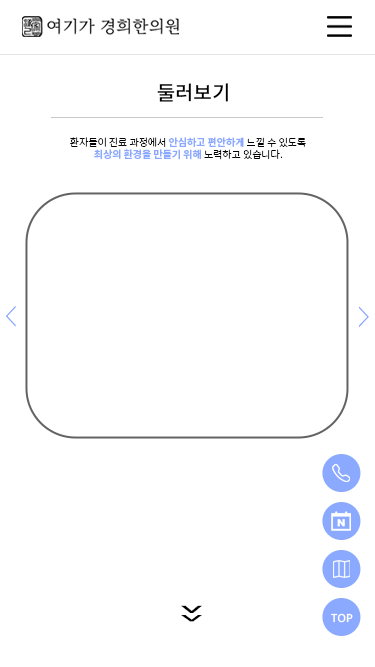
<style>
.page{position:relative;width:375px;height:667px;background:#ffffff}
.page>*{position:absolute;margin:0}
.t1{font:20px "NotoSansKR-Medium";color:#000000}
.t2{font:10px/12px "NotoSansKR-Bold";color:#8aa9ff}
.t3{font:10px/12px "NotoSansKR-Light";color:#000000}
.t4{font:26.1px "NotoSansKR-Light";color:#8aa9ff;scale:0.48 1}
.t5{font:55.7px "NotoSansKR-Light";color:#000000;scale:1.27 1}
.t6{font:48.8px "NotoSansKR-Light";color:#000000;scale:1.45 1}
.t7{font:11.1px "NotoSans-Medium";color:#ffffff}
</style>
<div class="page">
<p class="t1" style="left:157px;top:83px;width:71px;height:19px">둘러보기</p>
<p class="t2" style="left:70px;top:137px;width:236px;height:23px;text-align:center"><span class="t3">환자들이 진료 과정에서 </span>안심하고 편안하게<span class="t3"> 느낄 수 있도록 <br></span>최상의 환경을 만들기 위해<span class="t3"> 노력하고 있습니다.</span></p>
<p class="t4" style="left:6px;top:306px;width:10px;height:21px">＜</p>
<p class="t4" style="left:358px;top:306px;width:11px;height:21px;rotate:180deg">＜</p>
<p class="t5" style="left:181px;top:605px;width:21px;height:8px;rotate:180deg">＾</p>
<p class="t6" style="left:181px;top:615px;width:21px;height:7px;rotate:180deg">＾</p>
<p class="t7" style="left:331px;top:613px;width:22px;height:10px">TOP</p>
</div>
